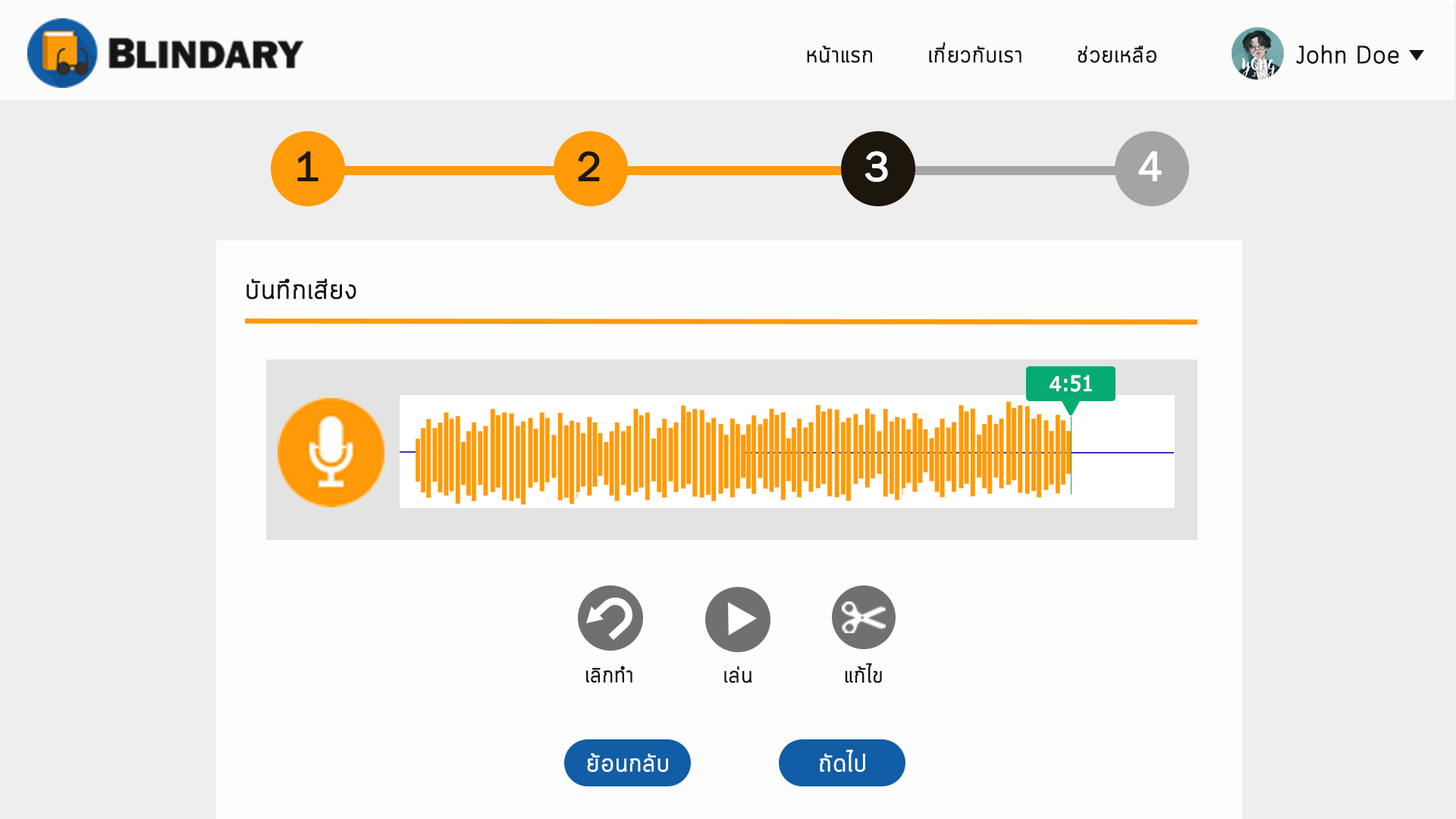
<style>
.page{position:relative;width:1456px;height:819px;background:#eeeeee}
.page>*{position:absolute;margin:0}
.t1{font:22.7px "Cloud-Light";color:#141414;font-weight:bold}
.t2{font:24.2px "Cloud-Light";color:#141414;font-weight:bold}
.t3{font:42.1px "FranklinGothic-Book";color:#1c160d;font-weight:bold}
.t4{font:42.1px "FranklinGothic-Book";color:#ffffff;font-weight:bold}
.t5{font:27.3px "Cloud-Light";color:#141414;font-weight:bold}
.t6{font:21.2px "Tahoma";color:#ffffff;font-weight:bold}
.t7{font:21.2px "FranklinGothic-Book";color:#ffffff;font-weight:bold}
.t8{font:22.1px "Cloud-Light";color:#141414;font-weight:bold;scale:0.97 1}
.t9{font:22.1px "Cloud-Light";color:#141414;font-weight:bold}
.t10{font:24.6px "Cloud-Light";color:#fefdfd;font-weight:bold}
</style>
<div class="page">
<p class="t1" style="left:807px;top:42px;width:349px;height:21px">หน้าแรก       เกี่ยวกับเรา       ช่วยเหลือ</p>
<p class="t2" style="left:1296px;top:45px;width:103px;height:19px">John Doe</p>
<p class="t3" style="left:297px;top:151px;width:21px;height:30px">1</p>
<p class="t3" style="left:578px;top:151px;width:22px;height:30px">2</p>
<p class="t4" style="left:865px;top:151px;width:23px;height:31px">3</p>
<p class="t4" style="left:1138px;top:151px;width:24px;height:30px">4</p>
<p class="t5" style="left:246px;top:278px;width:110px;height:22px">บันทึกเสียง</p>
<p class="t6" style="left:1050px;top:375px;width:42px;height:17px"><span class="t7">4</span>:51</p>
<p class="t8" style="left:586px;top:666px;width:46px;height:17px">เลิกทำ</p>
<p class="t9" style="left:724px;top:666px;width:28px;height:17px">เล่น</p>
<p class="t9" style="left:845px;top:663px;width:37px;height:20px">แก้ไข</p>
<p class="t10" style="left:820px;top:749px;width:45px;height:23px">ถัดไป</p>
<p class="t10" style="left:587px;top:753px;width:81px;height:19px">ย้อนกลับ</p>
</div>
